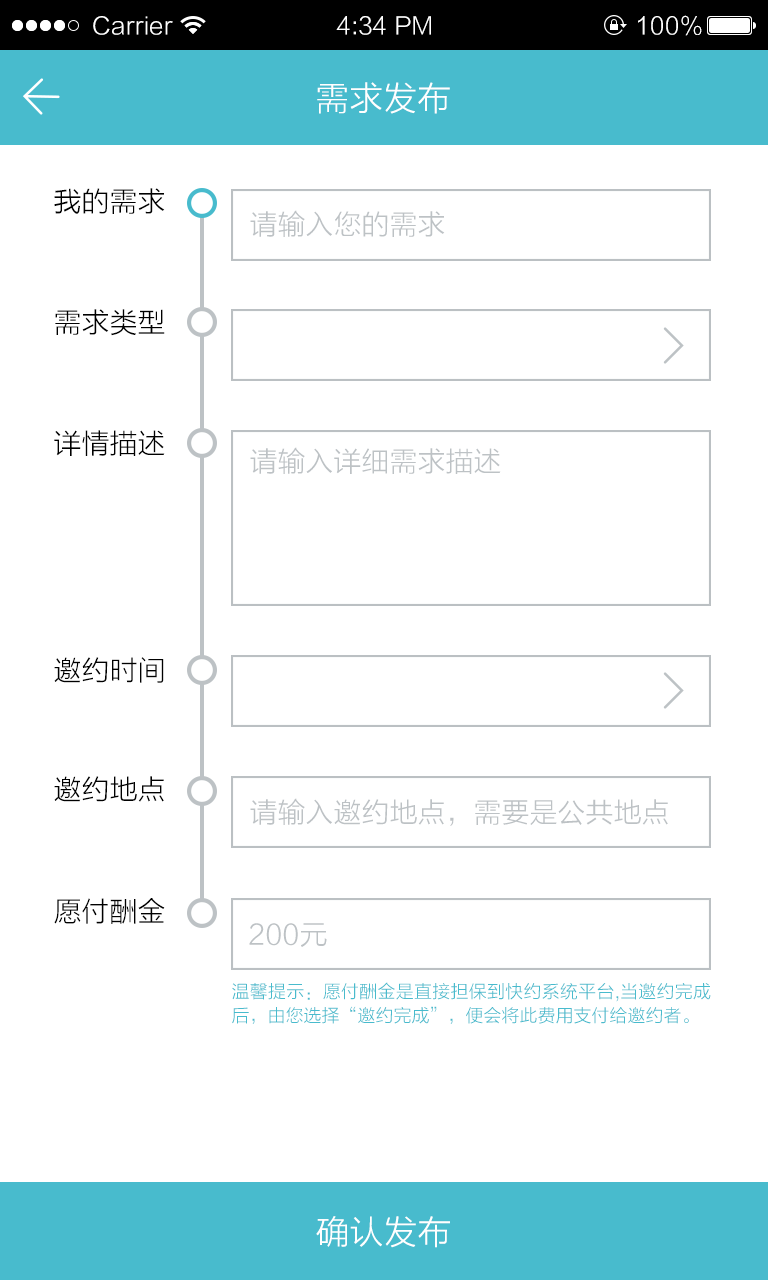
<style>
.page{position:relative;width:768px;height:1280px;background:#ffffff}
.page>*{position:absolute;margin:0}
.t1{font:24px "FZLTXHK";color:#ffffff}
.t2{font:34px "FZLTXHK";color:#ffffff}
.t3{font:28px "FZLTXHK";color:#000000}
.t4{font:28px "FZLTXHK";color:#bdc2c5}
.t5{font:18px/24px "FZLTXHK";letter-spacing:0.014em;color:#48bbcd}
.t6{font:18px/24px "FZLTXHK";color:#48bbcd}
</style>
<div class="page">
<p class="t1" style="left:93px;top:16px;width:80px;height:19px">Carrier</p>
<p class="t1" style="left:336px;top:16px;width:95px;height:19px">4:34 PM</p>
<p class="t1" style="left:638px;top:15px;width:64px;height:21px">100%</p>
<p class="t2" style="left:317px;top:82px;width:133px;height:32px">需求发布</p>
<p class="t3" style="left:54px;top:188px;width:111px;height:26px">我的需求</p>
<p class="t4" style="left:250px;top:210px;width:195px;height:27px">请输入您的需求</p>
<p class="t3" style="left:55px;top:309px;width:110px;height:27px">需求类型</p>
<p class="t3" style="left:54px;top:430px;width:111px;height:26px">详情描述</p>
<p class="t4" style="left:250px;top:447px;width:251px;height:27px">请输入详细需求描述</p>
<p class="t3" style="left:54px;top:657px;width:110px;height:26px">邀约时间</p>
<p class="t3" style="left:54px;top:776px;width:110px;height:26px">邀约地点</p>
<p class="t4" style="left:250px;top:798px;width:418px;height:28px">请输入邀约地点，需要是公共地点</p>
<p class="t3" style="left:54px;top:898px;width:111px;height:26px">愿付酬金</p>
<p class="t4" style="left:249px;top:923px;width:78px;height:24px">200元</p>
<p class="t5" style="left:232px;top:982px;width:479px;height:42px">温馨提示：愿付酬金是直接担保到快约系统平台,当邀约完成<br><span class="t6">后，由您选择“邀约完成”，便会将此费用支付给邀约者。</span></p>
<p class="t2" style="left:316px;top:1216px;width:134px;height:32px">确认发布</p>
</div>
